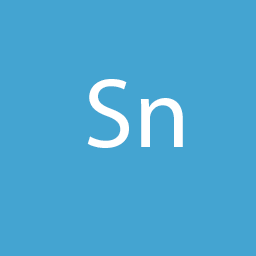
<style>
.page{position:relative;width:256px;height:256px;background:#44a4d1}
.page>*{position:absolute;margin:0}
.t1{font:100px "MyriadPro-Regular";color:#ffffff}
</style>
<div class="page">
<p class="t1" style="left:87px;top:79px;width:96px;height:69px">Sn</p>
</div>
